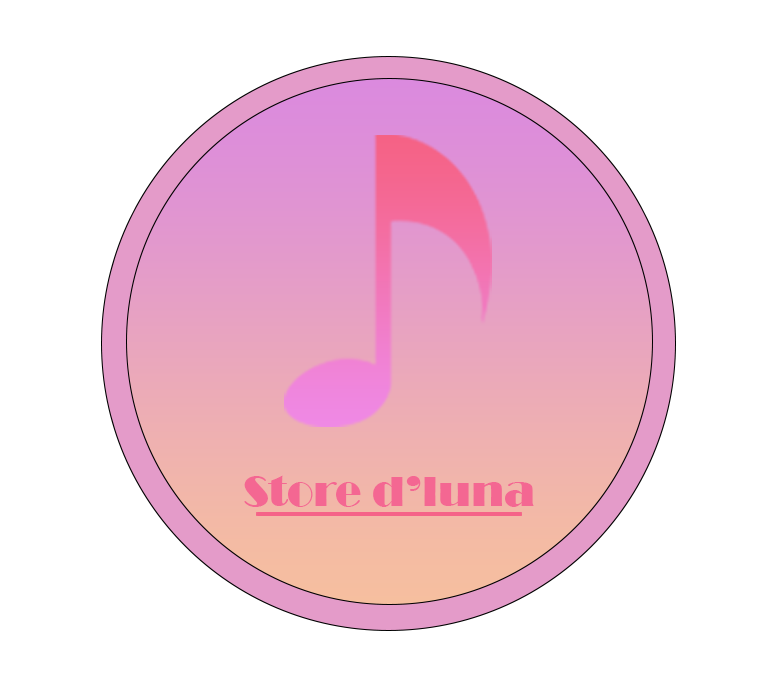
<style>
.page{position:relative;width:776px;height:686px;background:#ffffff}
.page>*{position:absolute;margin:0}
.t1{font:43.8px "Broadway";color:#f46792}
</style>
<div class="page">
<p class="t1" style="left:244px;top:475px;width:290px;height:32px">Store d’luna</p>
</div>
